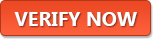
<style>
.page{position:relative;width:153px;height:39px}
.page>*{position:absolute;margin:0}
.t1{font:20px "SegoeUI-Bold";color:#ffffff}
</style>
<div class="page">
<p class="t1" style="left:14px;top:12px;width:123px;height:14px">VERIFY NOW</p>
</div>
